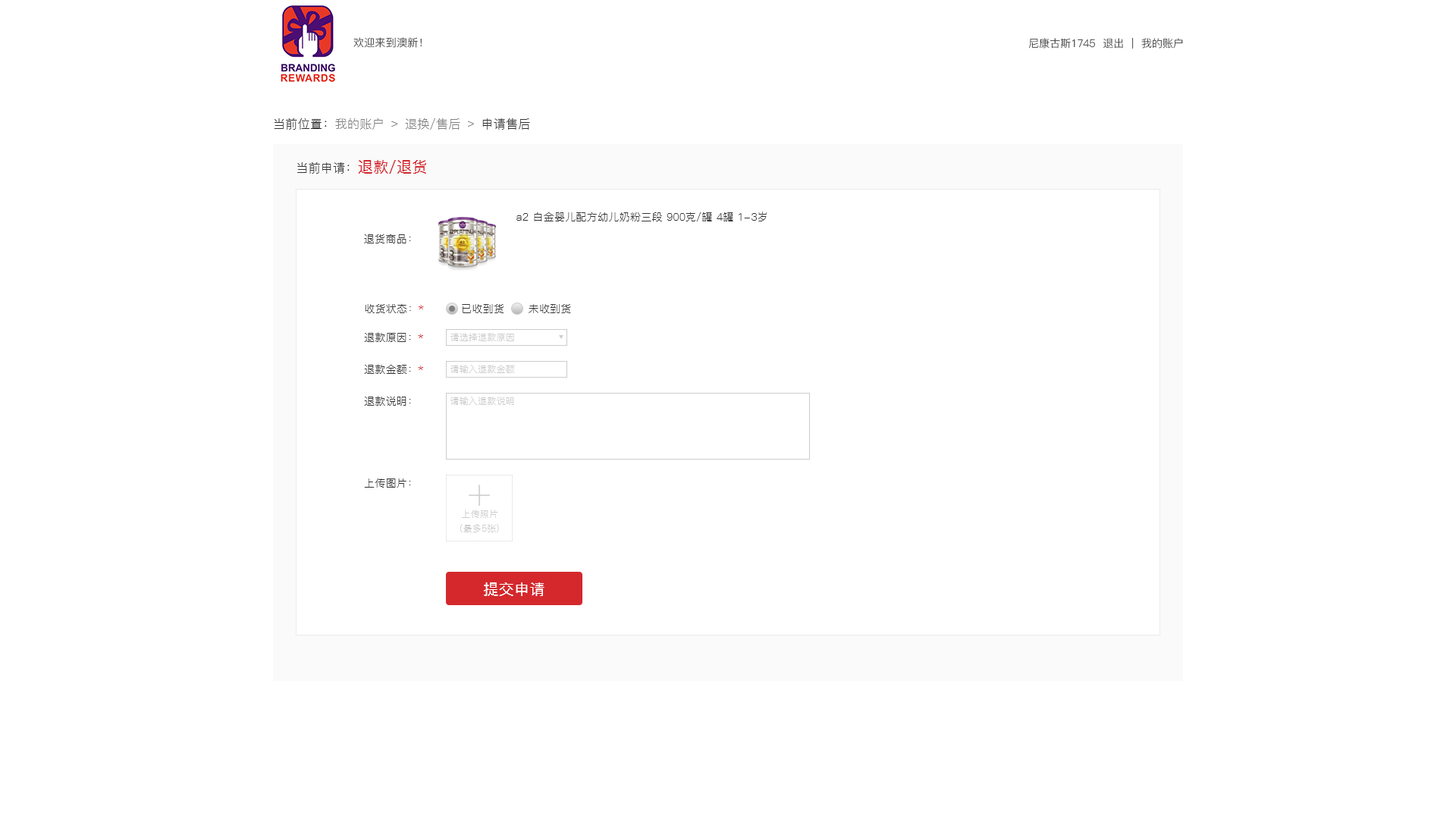
<style>
.page{position:relative;width:1456px;height:819px;background:#ffffff}
.page>*{position:absolute;margin:0}
.t1{font:10.6px "PingFang-SC-Regular";letter-spacing:0.02em}
.t2{font:10.6px "PingFang-SC-Regular";color:#333333}
.t3{font:12.1px "PingFang-SC-Regular";letter-spacing:0.02em;color:#808080}
.t4{font:12.1px "PingFang-SC-Regular";letter-spacing:0.02em;color:#333333}
.t5{font:15.2px "PingFang-SC-Medium";letter-spacing:0.02em;color:#d4282d}
.t6{font:10.6px "PingFang-SC-Regular";letter-spacing:0.02em;color:#333333}
.t7{font:10.6px "PingFang-SC-Regular";letter-spacing:0.02em;color:#d4282d}
.t8{font:9.1px "PingFang-SC-Regular";letter-spacing:0.02em;color:#cccccc}
.t9{font:15.2px "PingFang-SC-Medium";letter-spacing:0.02em;color:#ffffff}
</style>
<div class="page">
<p class="t1" style="left:353px;top:37px;width:69px;height:11px">欢迎来到澳新！</p>
<p class="t2" style="left:1028px;top:37px;width:155px;height:12px">尼康古斯1745  退出  |  我的账户</p>
<p class="t3" style="left:274px;top:118px;width:256px;height:12px"><span class="t4">当前位置：</span>我的账户 ﹥ 退换/售后 ﹥<span class="t4"> 申请售后</span></p>
<p class="t4" style="left:297px;top:160px;width:129px;height:14px">当前申请：<span class="t5">退款/退货</span></p>
<p class="t6" style="left:516px;top:212px;width:251px;height:9px">a2 白金婴儿配方幼儿奶粉三段 900克/罐 4罐 1-3岁</p>
<p class="t6" style="left:364px;top:234px;width:47px;height:9px">退货商品：</p>
<p class="t6" style="left:365px;top:303px;width:59px;height:10px">收货状态：<span class="t7">*</span></p>
<p class="t6" style="left:462px;top:304px;width:42px;height:9px">已收到货</p>
<p class="t6" style="left:529px;top:304px;width:42px;height:9px">未收到货</p>
<p class="t6" style="left:364px;top:332px;width:59px;height:10px">退款原因：<span class="t7">*</span></p>
<p class="t8" style="left:450px;top:333px;width:64px;height:8px">请选择退款原因</p>
<p class="t6" style="left:364px;top:364px;width:59px;height:10px">退款金额：<span class="t7">*</span></p>
<p class="t8" style="left:450px;top:365px;width:65px;height:8px">请输入退款金额</p>
<p class="t6" style="left:364px;top:396px;width:47px;height:10px">退款说明：</p>
<p class="t8" style="left:450px;top:397px;width:64px;height:8px">请输入退款说明</p>
<p class="t6" style="left:364px;top:479px;width:47px;height:9px">上传图片：</p>
<p class="t8" style="left:462px;top:510px;width:36px;height:8px">上传照片</p>
<p class="t8" style="left:460px;top:524px;width:39px;height:8px">(最多5张)</p>
<p class="t9" style="left:484px;top:582px;width:60px;height:14px">提交申请</p>
</div>
